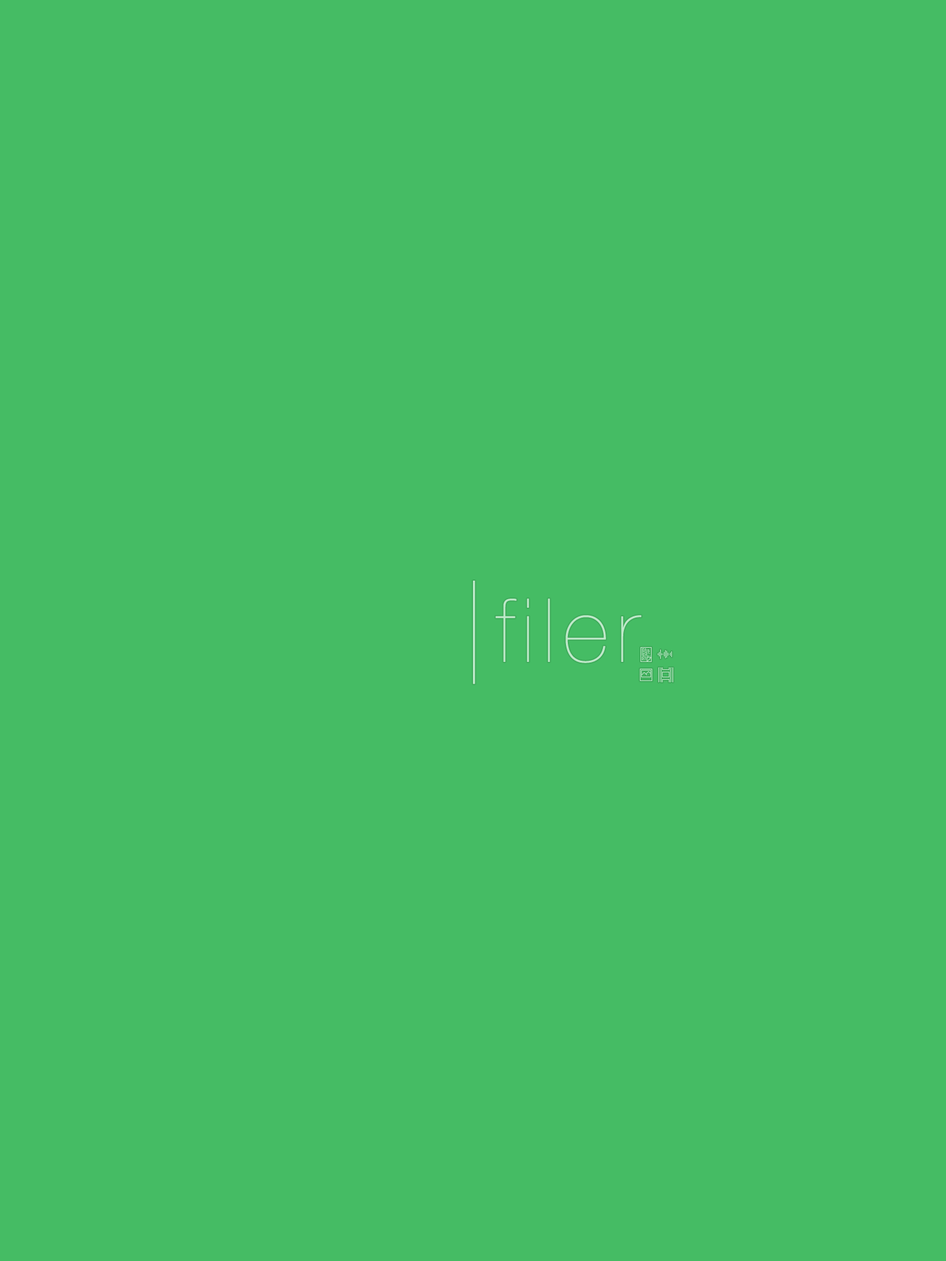
<style>
.page{position:relative;width:946px;height:1261px;background:#45bc64}
.page>*{position:absolute;margin:0}
.t1{font:88.7px "HelveticaNeue-UltraLight";letter-spacing:0.1em;color:#c0e8ca}
.t2{font:103.4px "HelveticaNeue-UltraLight";letter-spacing:0.1em;color:#c0e8ca}
</style>
<div class="page">
<p class="t1" style="left:473px;top:581px;width:169px;height:103px"><span class="t2">|</span>filer</p>
</div>
